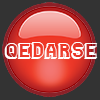
<style>
.page{position:relative;width:100px;height:100px;background:#333333}
.page>*{position:absolute;margin:0}
.t1{font:24px "Casino3D-Regular";color:#ffffff}
</style>
<div class="page">
<p class="t1" style="left:4px;top:42px;width:94px;height:17px">Qedarse</p>
</div>
